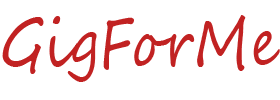
<style>
.page{position:relative;width:280px;height:100px;background:#ffffff}
.page>*{position:absolute;margin:0}
.t1{font:67.2px "SegoeScript";color:#c12222;scale:0.82 1}
</style>
<div class="page">
<p class="t1" style="left:2px;top:15px;width:278px;height:67px">GigForMe</p>
</div>
